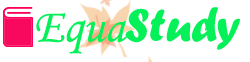
<style>
.page{position:relative;width:250px;height:62px;background:#ffffff}
.page>*{position:absolute;margin:0}
.t1{font:48px "ForteMT";color:#05f059}
.t2{font:48px "MonotypeCorsiva";color:#05f059}
</style>
<div class="page">
<p class="t1" style="left:36px;top:7px;width:204px;height:47px"><span class="t2">Equa</span>Study</p>
</div>
